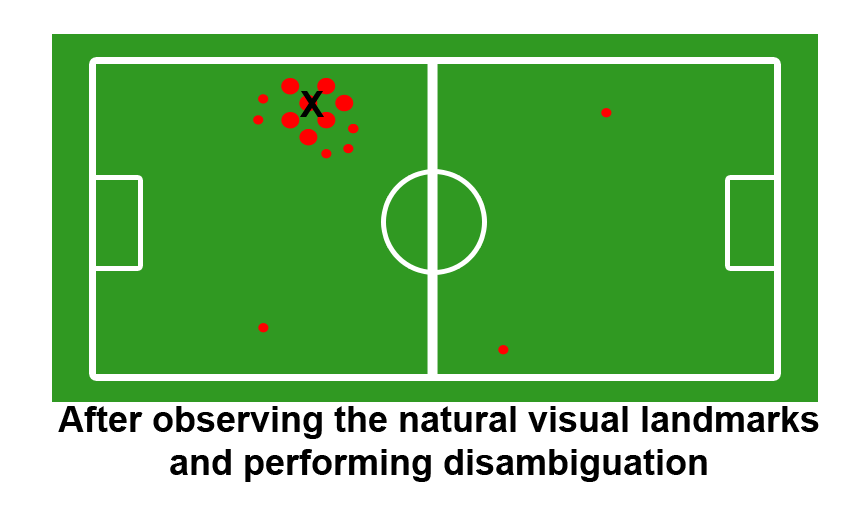
<style>
.page{position:relative;width:854px;height:526px;background:#309922}
.page>*{position:absolute;margin:0}
.t1{font:36px "Arial-BoldMT";color:#000000}
</style>
<div class="page">
<p class="t1" style="left:300px;top:91px;width:24px;height:26px">X</p>
<p class="t1" style="left:58px;top:406px;width:761px;height:76px;text-align:center">After observing the natural visual landmarks<br>and performing disambiguation</p>
</div>
